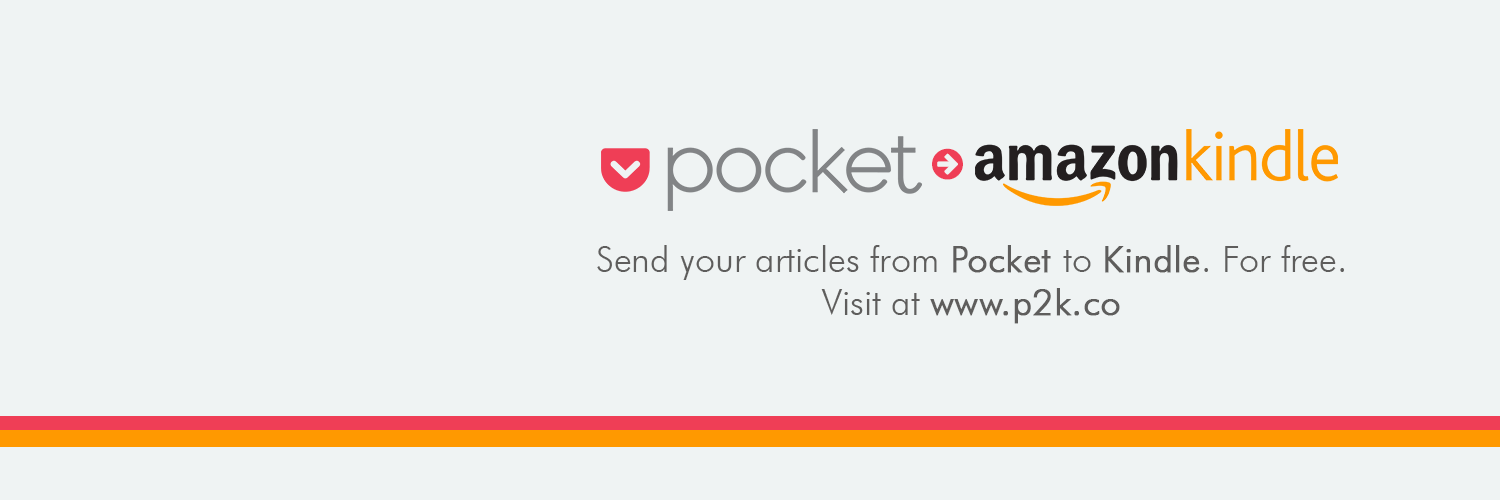
<style>
.page{position:relative;width:1500px;height:500px;background:#eff3f3}
.page>*{position:absolute;margin:0}
.t1{font:36px "FuturaBT-Light";color:#5e5d5c}
.t2{font:36px "FuturaBT-Light";color:#5e5d5c;font-weight:bold}
</style>
<div class="page">
<p class="t1" style="left:597px;top:245px;width:747px;height:79px;text-align:center">Send your articles from <span class="t2">Pocket </span>to <span class="t2">Kindle</span>. For free.<br>Visit at <span class="t2">www.p2k.co</span></p>
</div>
